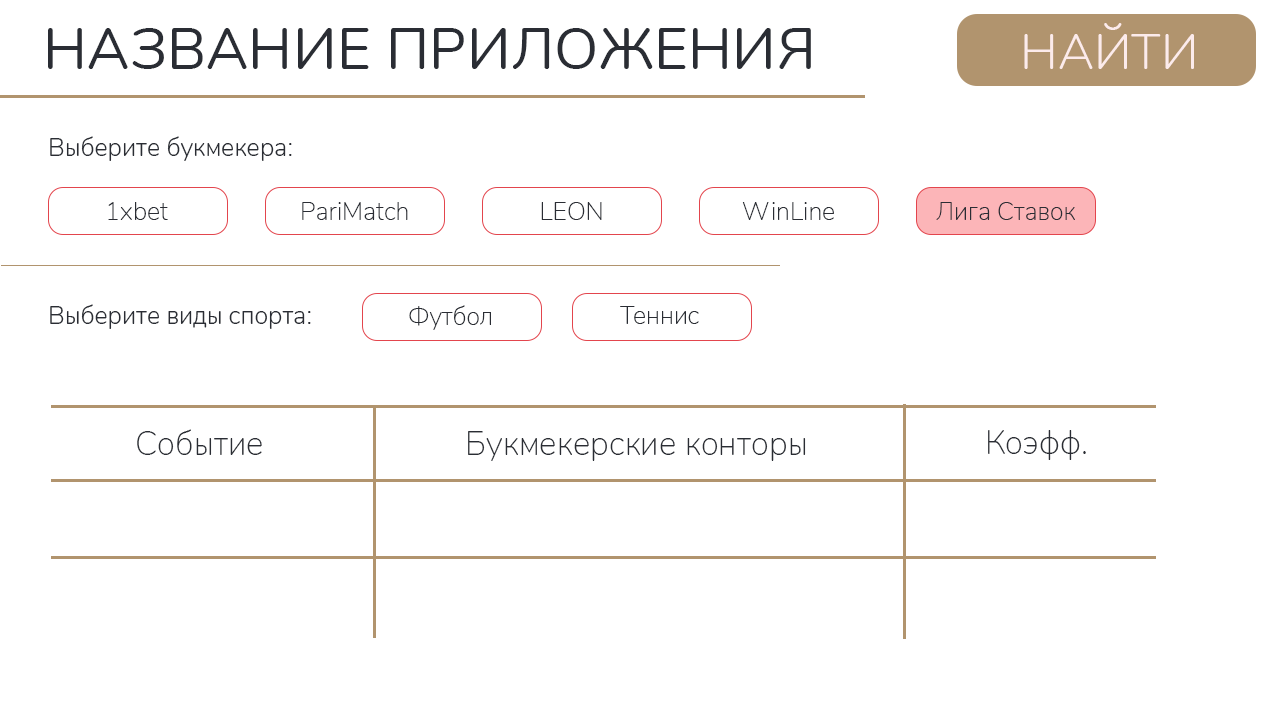
<style>
.page{position:relative;width:1280px;height:720px;background:#ffffff}
.page>*{position:absolute;margin:0}
.t1{font:58.3px "Nunito-Regular";color:#2a2d34}
.t2{font:50px "Nunito-Light";color:#fcebeb}
.t3{font:25px "Nunito-Light";color:#2a2d34}
.t4{font:25px "Nunito-ExtraLight";color:#2a2d34}
.t5{font:33.3px "Nunito-ExtraLight";color:#2a2d34}
</style>
<div class="page">
<p class="t1" style="left:48px;top:28px;width:763px;height:41px">НАЗВАНИЕ ПРИЛОЖЕНИЯ</p>
<p class="t2" style="left:1024px;top:23px;width:170px;height:46px">НАЙТИ</p>
<p class="t3" style="left:50px;top:136px;width:242px;height:25px">Выберите букмекера:</p>
<p class="t4" style="left:108px;top:202px;width:60px;height:18px">1xbet</p>
<p class="t4" style="left:302px;top:202px;width:106px;height:18px">PariMatch</p>
<p class="t4" style="left:541px;top:202px;width:61px;height:18px">LEON</p>
<p class="t4" style="left:742px;top:202px;width:92px;height:18px">WinLine</p>
<p class="t4" style="left:936px;top:202px;width:139px;height:18px">Лига Ставок</p>
<p class="t3" style="left:50px;top:304px;width:261px;height:25px">Выберите виды спорта:</p>
<p class="t4" style="left:409px;top:305px;width:82px;height:25px">Футбол</p>
<p class="t4" style="left:620px;top:306px;width:79px;height:18px">Теннис</p>
<p class="t5" style="left:137px;top:429px;width:125px;height:26px">Событие</p>
<p class="t5" style="left:468px;top:431px;width:338px;height:30px">Букмекерские конторы</p>
<p class="t5" style="left:988px;top:430px;width:98px;height:30px">Коэфф.</p>
</div>
